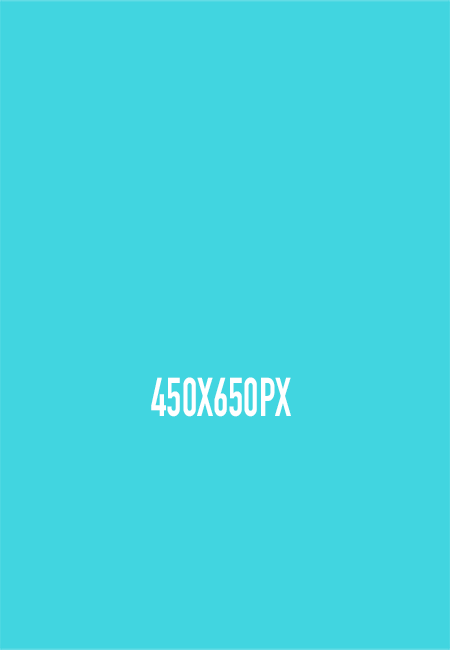
<style>
.page{position:relative;width:450px;height:650px;background:#41d5e0}
.page>*{position:absolute;margin:0}
.t1{font:53.9px "DINCondensed-Bold";color:#ffffff;text-transform:uppercase;scale:0.76 1}
</style>
<div class="page">
<p class="t1" style="left:151px;top:377px;width:140px;height:40px">450X650PX</p>
</div>
